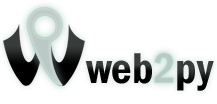
<style>
.page{position:relative;width:217px;height:104px;background:#ffffff}
.page>*{position:absolute;margin:0}
.t1{font:44.4px "FranklinGothic-DemiCond";color:#010101}
.t2{font:44.4px "FranklinGothic-DemiCond";color:#bac8c6}
.t3{font:44.4px "FranklinGothic-DemiCond"}
</style>
<div class="page">
<p class="t1" style="left:85px;top:53px;width:67px;height:31px">web</p>
<p class="t2" style="left:154px;top:52px;width:20px;height:31px">2</p>
<p class="t3" style="left:177px;top:60px;width:37px;height:31px">py</p>
</div>
